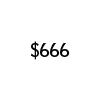
<style>
.page{position:relative;width:100px;height:100px;background:#ffffff}
.page>*{position:absolute;margin:0}
.t1{font:18px "BellGothicStd-Bold";color:#070707}
</style>
<div class="page">
<p class="t1" style="left:30px;top:41px;width:40px;height:19px">$666</p>
</div>
